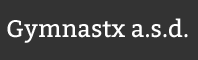
<style>
.page{position:relative;width:198px;height:60px;background:#333333}
.page>*{position:absolute;margin:0}
.t1{font:24px "Bitter-Regular";color:#ffffff}
</style>
<div class="page">
<p class="t1" style="left:7px;top:18px;width:181px;height:25px">Gymnastx a.s.d.</p>
</div>
